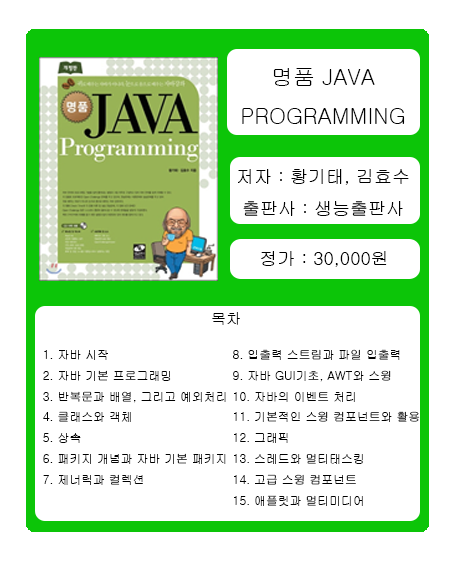
<style>
.page{position:relative;width:454px;height:567px;background:#ffffff}
.page>*{position:absolute;margin:0}
.t1{font:22px "Gulim";color:#000000}
.t2{font:18px "Gulim";color:#000000}
.t3{font:15px "Gulim";color:#000000}
.t4{font:11.9px "Gulim";color:#000000}
</style>
<div class="page">
<p class="t1" style="left:242px;top:68px;width:163px;height:56px;text-align:center">명품 JAVA<br>PROGRAMMING</p>
<p class="t2" style="left:238px;top:169px;width:171px;height:47px;text-align:center">저자 : 황기태, 김효수<br>출판사 : 생능출판사</p>
<p class="t2" style="left:261px;top:251px;width:126px;height:16px">정가 : 30,000원</p>
<p class="t3" style="left:212px;top:312px;width:28px;height:13px">목차</p>
<p class="t4" style="left:43px;top:350px;width:183px;height:135px">1. 자바 시작<br>2. 자바 기본 프로그래밍<br>3. 반복문과 배열, 그리고 예외처리<br>4. 클래스와 객체<br>5. 상속<br>6. 패키지 개념과 자바 기본 패키지<br>7. 제너릭과 컬렉션</p>
<p class="t4" style="left:233px;top:349px;width:187px;height:157px">8. 입출력 스트림과 파일 입출력 <br>9. 자바 GUI기초, AWT와 스윙<br>10. 자바의 이벤트 처리<br>11. 기본적인 스윙 컴포넌트와 활용<br>12. 그래픽<br>13. 스레드와 멀티태스킹<br>14. 고급 스윙 컴포넌트<br>15. 애플릿과 멀티미디어</p>
</div>
